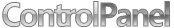
<style>
.page{position:relative;width:174px;height:28px;background:#ffffff}
.page>*{position:absolute;margin:0}
.t1{font:33.9px "SegoeUI-Bold";letter-spacing:-0.1em;font-weight:bold;scale:0.95 1}
</style>
<div class="page">
<p class="t1" style="left:2px;top:1px;width:97px;height:26px">Control</p>
<p class="t1" style="left:100px;top:1px;width:70px;height:26px">Panel</p>
</div>
